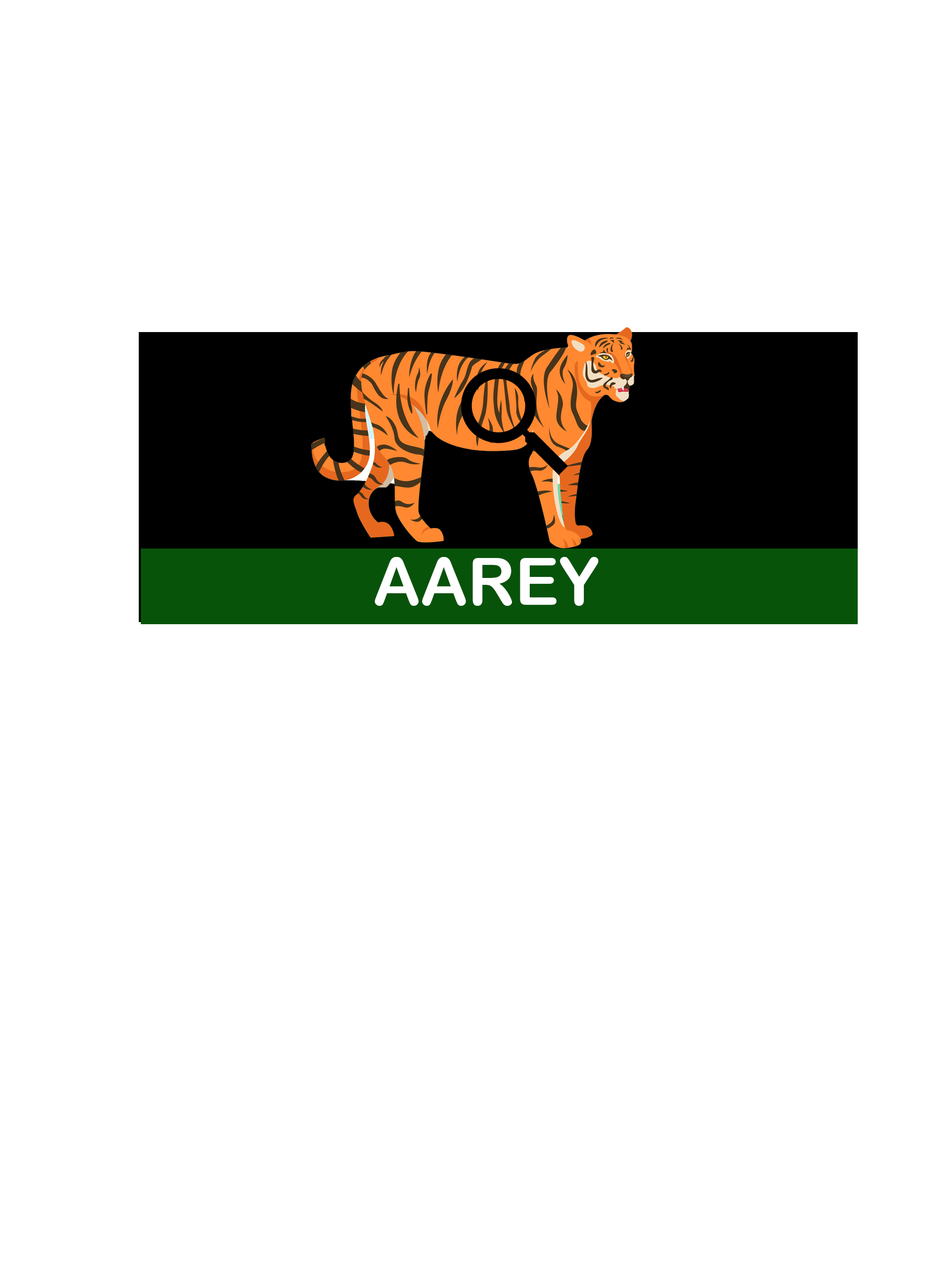
<style>
.page{position:relative;width:946px;height:1261px;background:#ffffff}
.page>*{position:absolute;margin:0}
.t1{font:65.7px "ArialRoundedMTBold";color:#ffffff}
</style>
<div class="page">
<p class="t1" style="left:375px;top:557px;width:223px;height:49px">AAREY</p>
</div>
